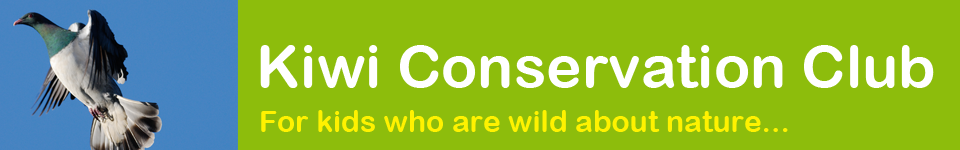
<style>
.page{position:relative;width:960px;height:150px;background:#8dbd0c}
.page>*{position:absolute;margin:0}
.t1{font:60px "ArialRoundedMTBold";color:#ffffff}
.t2{font:30px "ArialRoundedMTBold";color:#fff200}
</style>
<div class="page">
<p class="t1" style="left:260px;top:45px;width:674px;height:43px">Kiwi Conservation Club</p>
<p class="t2" style="left:261px;top:110px;width:527px;height:22px">For kids who are wild about nature...</p>
</div>
